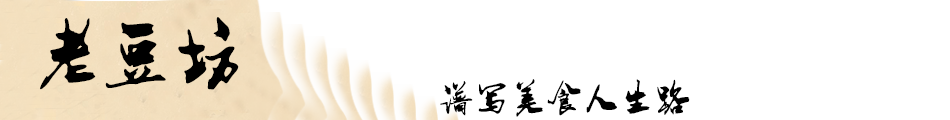
<style>
.page{position:relative;width:950px;height:120px;background:#ffffff}
.page>*{position:absolute;margin:0}
.t1{font:72px "HuJingLi-Mao";color:#000000}
.t2{font:36px "HuJingLi-Mao";color:#000000}
</style>
<div class="page">
<p class="t1" style="left:40px;top:17px;width:199px;height:73px">老豆坊</p>
<p class="t2" style="left:440px;top:79px;width:250px;height:38px">谱写美食人生路</p>
</div>
